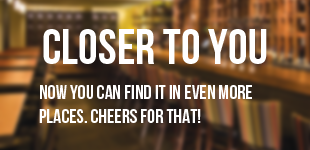
<style>
.page{position:relative;width:310px;height:150px}
.page>*{position:absolute;margin:0}
.t1{font:50px "BebasNeue";color:#ffffff;text-transform:uppercase}
.t2{font:20px "BebasNeue";color:#ffffff;text-transform:uppercase}
</style>
<div class="page">
<p class="t1" style="left:43px;top:29px;width:224px;height:35px">Closer to you</p>
<p class="t2" style="left:39px;top:85px;width:213px;height:38px">now you can find it in even more<br>places. Cheers for that!</p>
</div>
